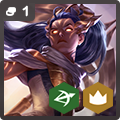
<style>
.page{position:relative;width:120px;height:120px}
.page>*{position:absolute;margin:0}
.t1{font:14px "ArialRoundedMTBold";letter-spacing:0.05em;color:#ffffff}
</style>
<div class="page">
<p class="t1" style="left:22px;top:5px;width:6px;height:12px">1</p>
</div>
